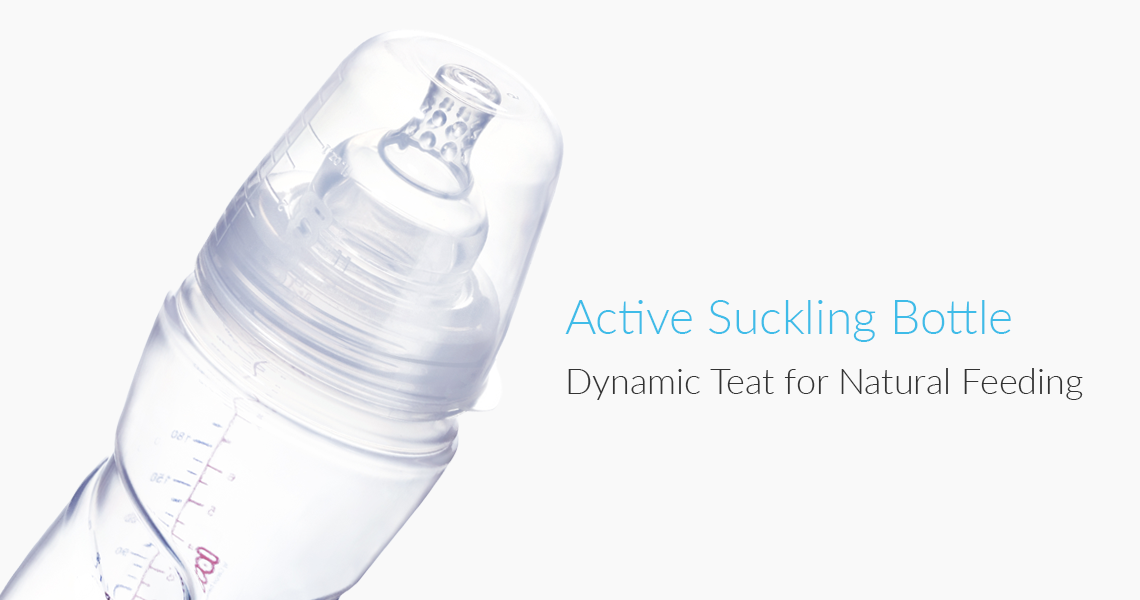
<style>
.page{position:relative;width:1140px;height:600px;background:#f9f9f9}
.page>*{position:absolute;margin:0}
.t1{font:36px/60px "Lato-Light";color:#333333}
.t2{font:48px/60px "Lato-Light";color:#3fbce8}
</style>
<div class="page">
<p class="t1" style="left:565px;top:300px;width:518px;height:100px"><span class="t2">Active Suckling Bottle<br></span>Dynamic Teat for Natural Feeding</p>
</div>
